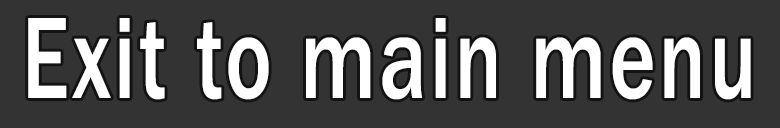
<style>
.page{position:relative;width:780px;height:128px;background:#333333}
.page>*{position:absolute;margin:0}
.t1{font:120px "FranklinGothic-Medium";letter-spacing:0.04em;color:#ffffff;scale:0.72 1}
</style>
<div class="page">
<p class="t1" style="left:28px;top:18px;width:723px;height:82px">Exit to main menu</p>
</div>
